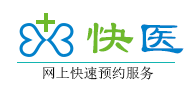
<style>
.page{position:relative;width:190px;height:90px;background:#ffffff}
.page>*{position:absolute;margin:0}
.t1{font:50px "LiSu";color:#6eb92c}
.t2{font:50px "LiSu";color:#0080cb}
.t3{font:14px "SimSun";color:#050505}
</style>
<div class="page">
<p class="t1" style="left:87px;top:22px;width:97px;height:32px">快<span class="t2">医</span></p>
<p class="t3" style="left:43px;top:66px;width:111px;height:14px">网上快速预约服务</p>
</div>
